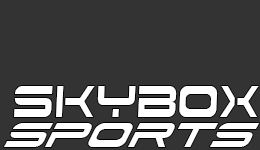
<style>
.page{position:relative;width:260px;height:150px;background:#333333}
.page>*{position:absolute;margin:0}
.t1{font:55.7px "DodgerCondensedItalic";color:#ffffff;scale:0.88 1}
.t2{font:41.2px "DodgerCondensedItalic";color:#ffffff;scale:1.19 1}
</style>
<div class="page">
<p class="t1" style="left:14px;top:86px;width:245px;height:31px">skybox</p>
<p class="t2" style="left:4px;top:123px;width:256px;height:24px">sports</p>
</div>
